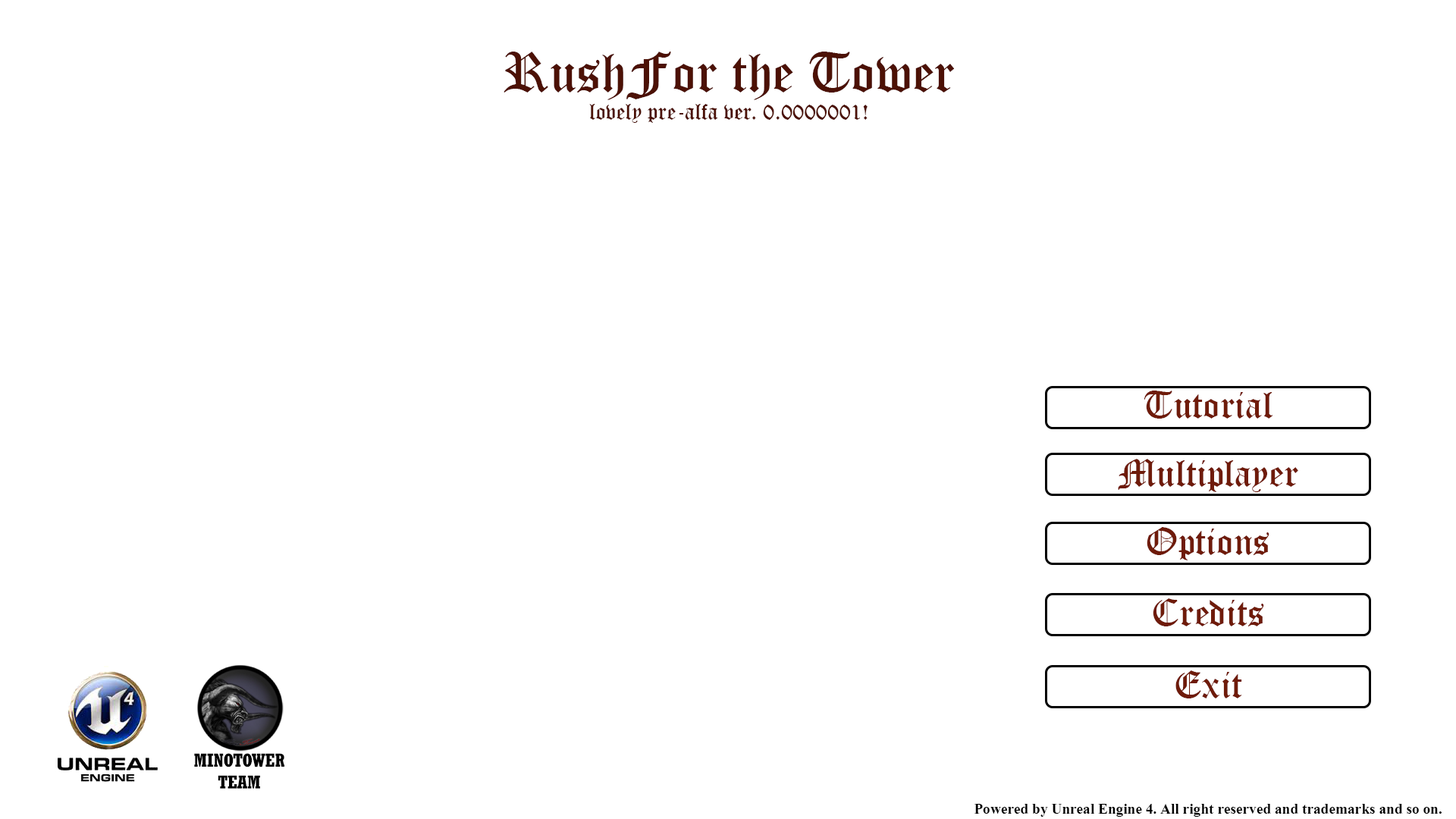
<style>
.page{position:relative;width:1456px;height:819px;background:#ffffff}
.page>*{position:absolute;margin:0}
.t1{font:22.7px "OldEnglishTextMT";color:#4c1105}
.t2{font:54.6px "OldEnglishTextMT";color:#4c1105}
.t3{font:37.9px "OldEnglishTextMT";color:#6f1b0a}
.t4{font:18.2px "Rockwell-CondensedBold";color:#000000}
.t5{font:18.2px "Aparajita-Bold";color:#000000}
</style>
<div class="page">
<p class="t1" style="left:504px;top:52px;width:450px;height:71px;text-align:center"><span class="t2">RushFor the Tower<br></span>lovely pre-alfa ver. 0.0000001!</p>
<p class="t3" style="left:1144px;top:391px;width:129px;height:28px">Tutorial</p>
<p class="t3" style="left:1118px;top:459px;width:180px;height:33px">Multiplayer</p>
<p class="t3" style="left:1147px;top:527px;width:122px;height:33px">Options</p>
<p class="t3" style="left:1153px;top:598px;width:111px;height:28px">Credits</p>
<p class="t3" style="left:1175px;top:670px;width:67px;height:28px">Exit</p>
<p class="t4" style="left:194px;top:753px;width:90px;height:36px;text-align:center">MINOTOWER<br>TEAM</p>
<p class="t5" style="left:974px;top:804px;width:468px;height:13px">Powered by Unreal Engine 4. All right reserved and trademarks and so on.</p>
</div>
